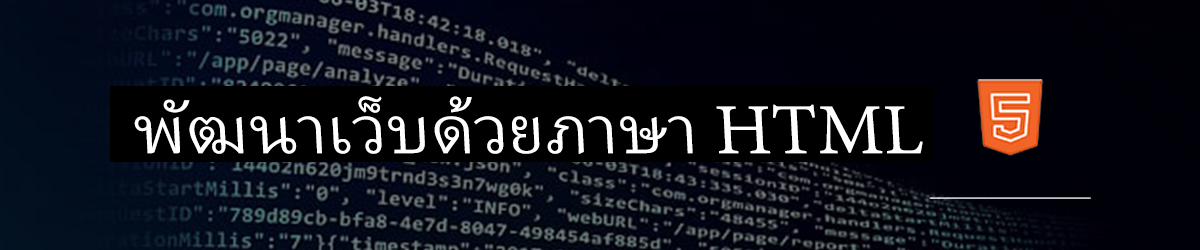
<style>
.page{position:relative;width:1200px;height:250px}
.page>*{position:absolute;margin:0}
.t1{font:87.1px "AdobeThai-Regular";color:#ffffff;scale:1.03 1}
</style>
<div class="page">
<p class="t1" style="left:134px;top:96px;width:789px;height:58px">พัฒนาเว็บด้วยภาษา HTML</p>
</div>
